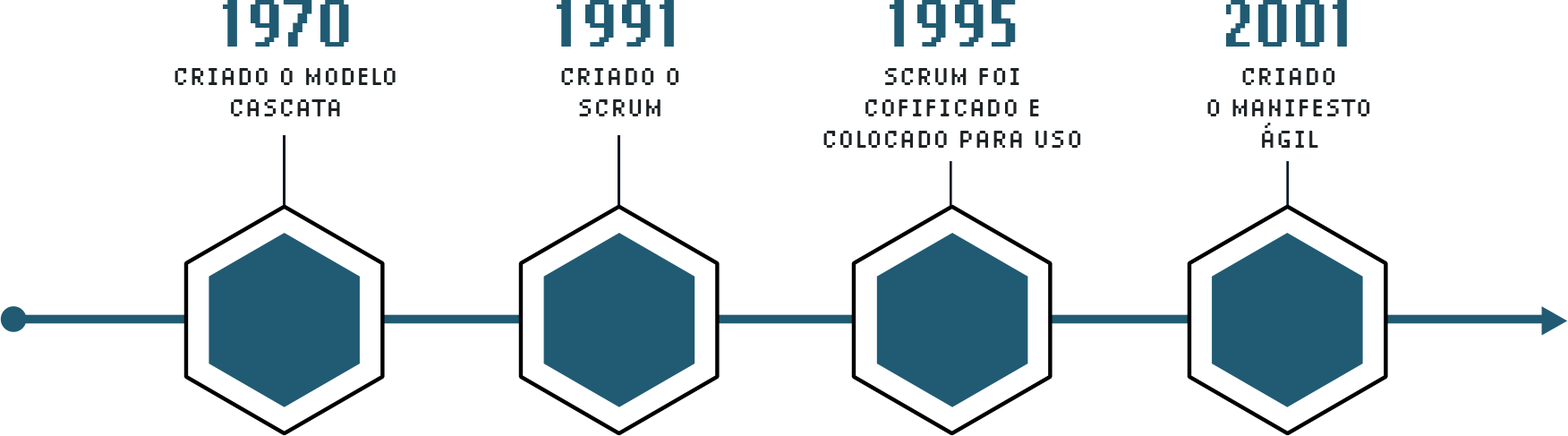
<style>
.page{position:relative;width:1568px;height:436px;background:#ffffff}
.page>*{position:absolute;margin:0}
.t1{font:69.8px "LoRes15OT-Bold";color:#205b73;text-transform:uppercase}
.t2{font:25.1px/31.3px "LoRes9PlusOT-NarrowRegular";color:#1e2326;text-transform:uppercase}
</style>
<div class="page">
<p class="t1" style="left:223px;top:0px;width:126px;height:47px">1970</p>
<p class="t1" style="left:557px;top:0px;width:117px;height:47px">1991</p>
<p class="t1" style="left:890px;top:0px;width:126px;height:47px">1995</p>
<p class="t1" style="left:1226px;top:0px;width:121px;height:47px">2001</p>
<p class="t2" style="left:175px;top:68px;width:221px;height:48px;text-align:center">Criado o modelo cascata</p>
<p class="t2" style="left:561px;top:68px;width:118px;height:48px;text-align:center">Criado o <br>scrum</p>
<p class="t2" style="left:823px;top:68px;width:258px;height:80px;text-align:center">scrum foi<br>cofificado e<br>colocado para uso</p>
<p class="t2" style="left:1207px;top:68px;width:163px;height:80px;text-align:center">Criado <br>o manifesto <br>ágil</p>
</div>
